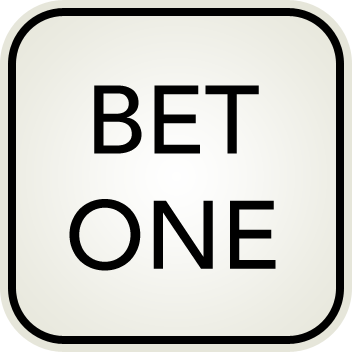
<style>
.page{position:relative;width:352px;height:352px}
.page>*{position:absolute;margin:0}
.t1{font:96px "Avenir-Medium";color:#000000}
</style>
<div class="page">
<p class="t1" style="left:69px;top:85px;width:207px;height:186px;text-align:center">BET<br>ONE</p>
</div>
